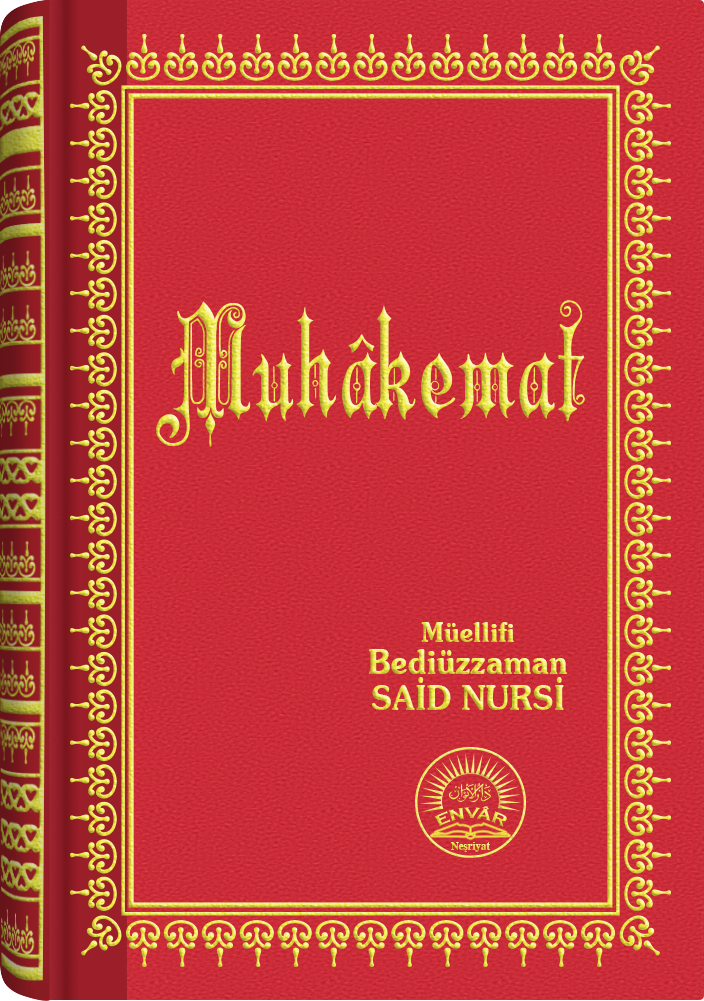
<style>
.page{position:relative;width:704px;height:1001px}
.page>*{position:absolute;margin:0}
.t1{font:148px "Barla © 001 Liva Nur";letter-spacing:-0.001em;scale:0.92 1}
.t2{font:33.4px/32.4px "SouvenirITCbyBT-Demi";scale:0.93 1}
.t3{font:27.4px/24.4px "SouvenirITCbyBT-Demi";scale:0.93 1}
.t4{font:33.4px/36.4px "SouvenirITCbyBT-Demi";scale:0.93 1}
.t5{font:15.6px "CopperplateGothic-Bold"}
.t6{font:11.2px "Times-Bold";scale:0.96 1}
</style>
<div class="page">
<p class="t1" style="left:156px;top:300px;width:429px;height:147px">Muhâkemat</p>
<p class="t2" style="left:369px;top:622px;width:198px;height:88px;text-align:center"><span class="t3">Müellifi<br></span>Bediüzzaman<br><span class="t4">SAİD NURSİ</span></p>
<p class="t5" style="left:434px;top:806px;width:73px;height:21px">ENVÂR</p>
<p class="t6" style="left:451px;top:842px;width:39px;height:10px">Neşriyat</p>
</div>
